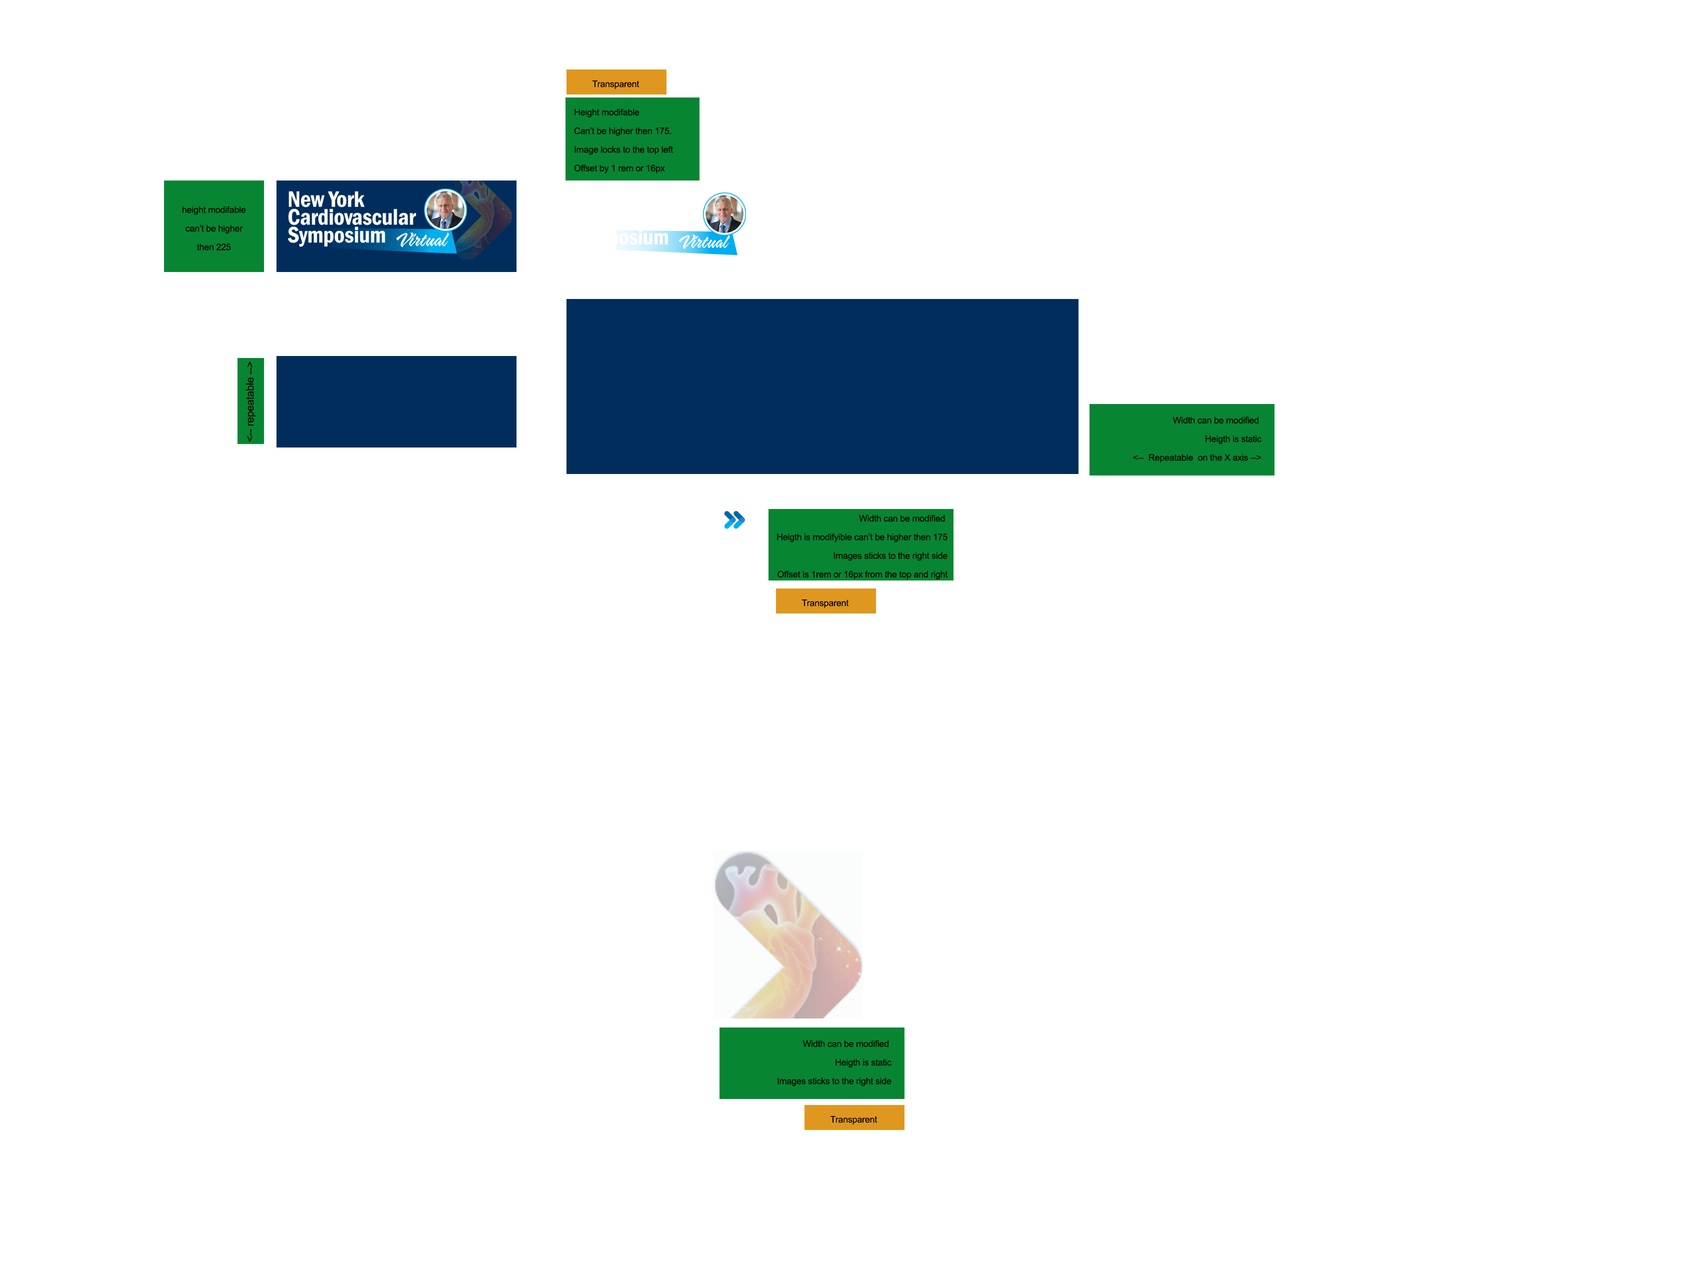
<style>
.page{position:relative;width:1707px;height:1280px;background:#ffffff}
.page>*{position:absolute;margin:0}
.t1{font:9px/18.6px "ArialMT";letter-spacing:-0.015em;color:#000000}
.t2{font:10.7px "ArialMT";letter-spacing:-0.015em;color:#000000}
</style>
<div class="page">
<p class="t1" style="left:574px;top:108px;width:99px;height:66px">Height modifable<br>Can’t be higher then 175.<br>Image locks to the top left<br>Offset by 1 rem or 16px</p>
<p class="t1" style="left:182px;top:206px;width:64px;height:44px;text-align:center">height modifable<br>can’t be higher<br>then 225</p>
<p class="t2" style="left:246px;top:362px;width:10px;height:80px;rotate:-90deg">&lt;-- repeatable --&gt;</p>
<p class="t1" style="left:1133px;top:416px;width:129px;height:46px;text-align:right">Width can be modified <br>Heigth is static<br>&lt;--  Repeatable  on the X axis --&gt;</p>
<p class="t1" style="left:777px;top:514px;width:171px;height:66px;text-align:right">Width can be modified <br>Heigth is modifyible can’t be higher then 175<br>Images sticks to the right side<br>Offset is 1rem or 16px from the top and right</p>
<p class="t1" style="left:778px;top:1040px;width:114px;height:46px;text-align:right">Width can be modified <br>Heigth is static<br>Images sticks to the right side</p>
</div>
